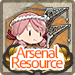
<style>
.page{position:relative;width:75px;height:75px}
.page>*{position:absolute;margin:0}
.t1{font:16px/10px "AdobeClean-Regular";letter-spacing:-0.08em;color:#ff5a00}
</style>
<div class="page">
<p class="t1" style="left:11px;top:46px;width:52px;height:23px;text-align:center">Arsenal<br>Resource</p>
</div>
